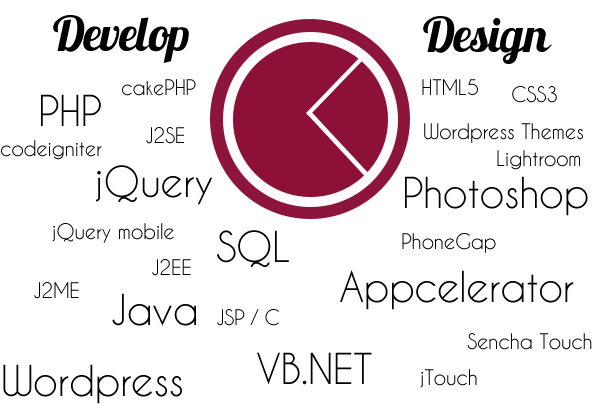
<style>
.page{position:relative;width:600px;height:412px;background:#ffffff}
.page>*{position:absolute;margin:0}
.t1{font:48px "Lobster13";letter-spacing:-0.015em;color:#000000}
.t2{font:20px "CaviarDreams";letter-spacing:-0.015em;color:#000000}
.t3{font:40px "CaviarDreams";letter-spacing:-0.015em;color:#000000}
</style>
<div class="page">
<p class="t1" style="left:53px;top:15px;width:136px;height:48px">Develop</p>
<p class="t1" style="left:423px;top:16px;width:129px;height:48px">Design</p>
<p class="t2" style="left:122px;top:79px;width:74px;height:17px">cakePHP</p>
<p class="t2" style="left:422px;top:79px;width:56px;height:16px">HTML5</p>
<p class="t2" style="left:512px;top:86px;width:45px;height:17px">CSS3</p>
<p class="t3" style="left:41px;top:94px;width:60px;height:32px">PHP</p>
<p class="t2" style="left:424px;top:123px;width:159px;height:20px">Wordpress Themes</p>
<p class="t2" style="left:146px;top:127px;width:38px;height:17px">J2SE</p>
<p class="t2" style="left:1px;top:140px;width:101px;height:20px">codeigniter</p>
<p class="t2" style="left:497px;top:150px;width:83px;height:20px">Lightroom</p>
<p class="t3" style="left:96px;top:165px;width:117px;height:40px">jQuery</p>
<p class="t3" style="left:405px;top:176px;width:183px;height:40px">Photoshop</p>
<p class="t2" style="left:52px;top:223px;width:122px;height:20px">jQuery mobile</p>
<p class="t3" style="left:217px;top:230px;width:72px;height:37px">SQL</p>
<p class="t2" style="left:402px;top:233px;width:94px;height:20px">PhoneGap</p>
<p class="t2" style="left:152px;top:259px;width:39px;height:17px">J2EE</p>
<p class="t3" style="left:340px;top:270px;width:234px;height:40px">Appcelerator</p>
<p class="t2" style="left:34px;top:282px;width:45px;height:17px">J2ME</p>
<p class="t3" style="left:112px;top:293px;width:84px;height:33px">Java</p>
<p class="t2" style="left:217px;top:309px;width:62px;height:17px">JSP / C</p>
<p class="t2" style="left:467px;top:333px;width:125px;height:17px">Sencha Touch</p>
<p class="t3" style="left:257px;top:352px;width:115px;height:33px">VB.NET</p>
<p class="t3" style="left:3px;top:364px;width:179px;height:40px">Wordpress</p>
<p class="t2" style="left:420px;top:369px;width:57px;height:19px">jTouch</p>
</div>
